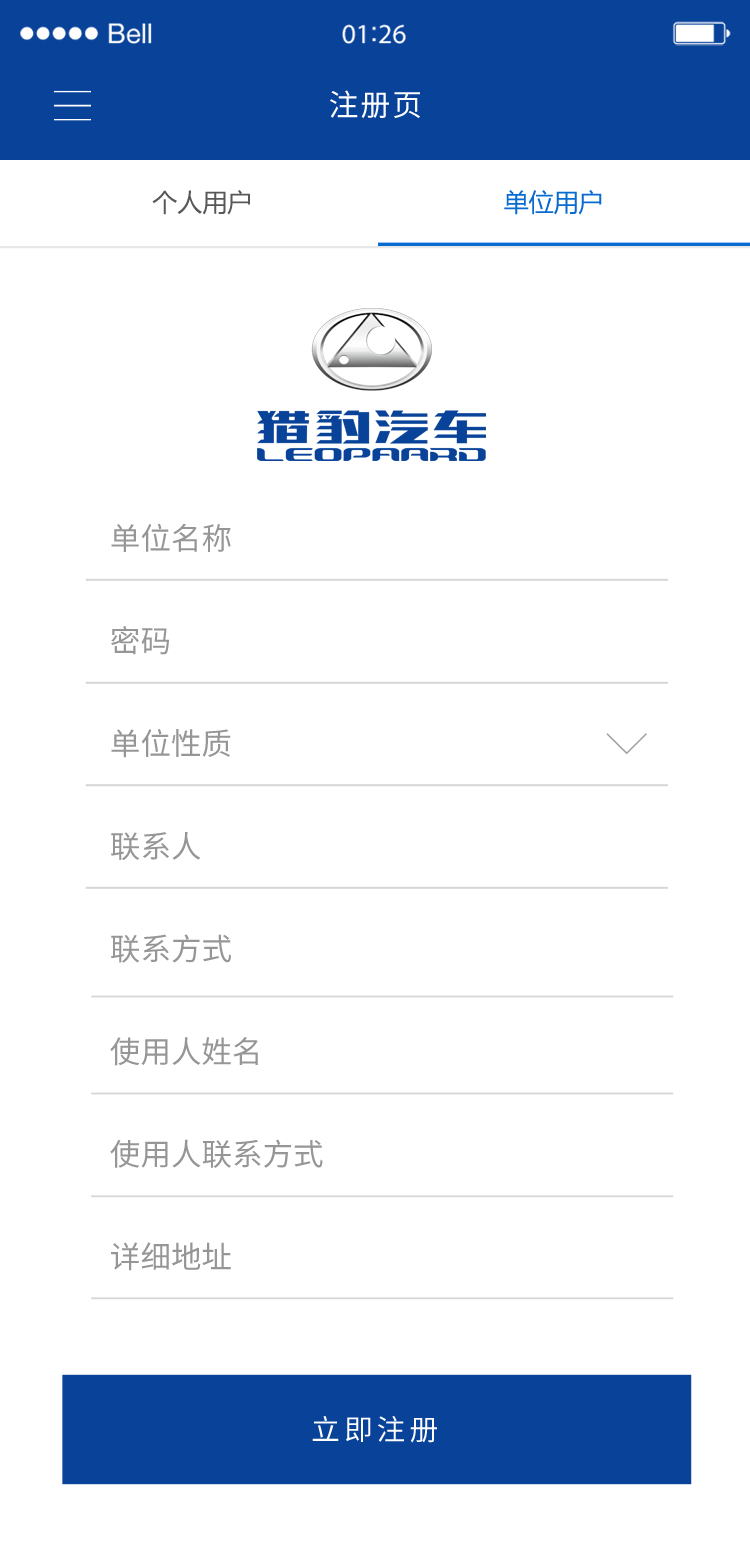
<style>
.page{position:relative;width:750px;height:1559px;background:#ffffff}
.page>*{position:absolute;margin:0}
.t1{font:30px "SourceHanSansCN-Regular";letter-spacing:0.06em;color:#ffffff}
.t2{font:25px "MicrosoftYaHei";color:#595757}
.t3{font:25px "MicrosoftYaHei";color:#076bcf}
.t4{font:30.5px/102.6px "SourceHanSansCN-Regular";color:#898989}
.t5{font:28.8px "SourceHanSansCN-Regular";letter-spacing:0.14em;color:#ffffff}
</style>
<div class="page">
<p class="t1" style="left:330px;top:90px;width:90px;height:29px">注册页</p>
<p class="t2" style="left:152px;top:190px;width:450px;height:25px">个人用户                                  <span class="t3">单位用户</span></p>
<p class="t4" style="left:110px;top:523px;width:213px;height:748px;opacity:0.89">单位名称<br>密码<br>单位性质 <br>联系人<br>联系方式<br>使用人姓名<br>使用人联系方式<br>详细地址</p>
<p class="t5" style="left:312px;top:1416px;width:125px;height:27px">立即注册</p>
</div>
